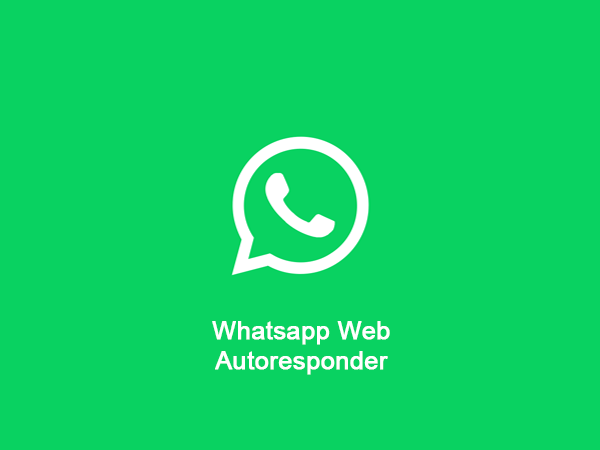
<style>
.page{position:relative;width:600px;height:450px;background:#09d261}
.page>*{position:absolute;margin:0}
.t1{font:25px "ArialMT";color:#ffffff;font-weight:bold}
</style>
<div class="page">
<p class="t1" style="left:212px;top:321px;width:178px;height:54px;text-align:center">Whatsapp Web<br>Autoresponder</p>
</div>
